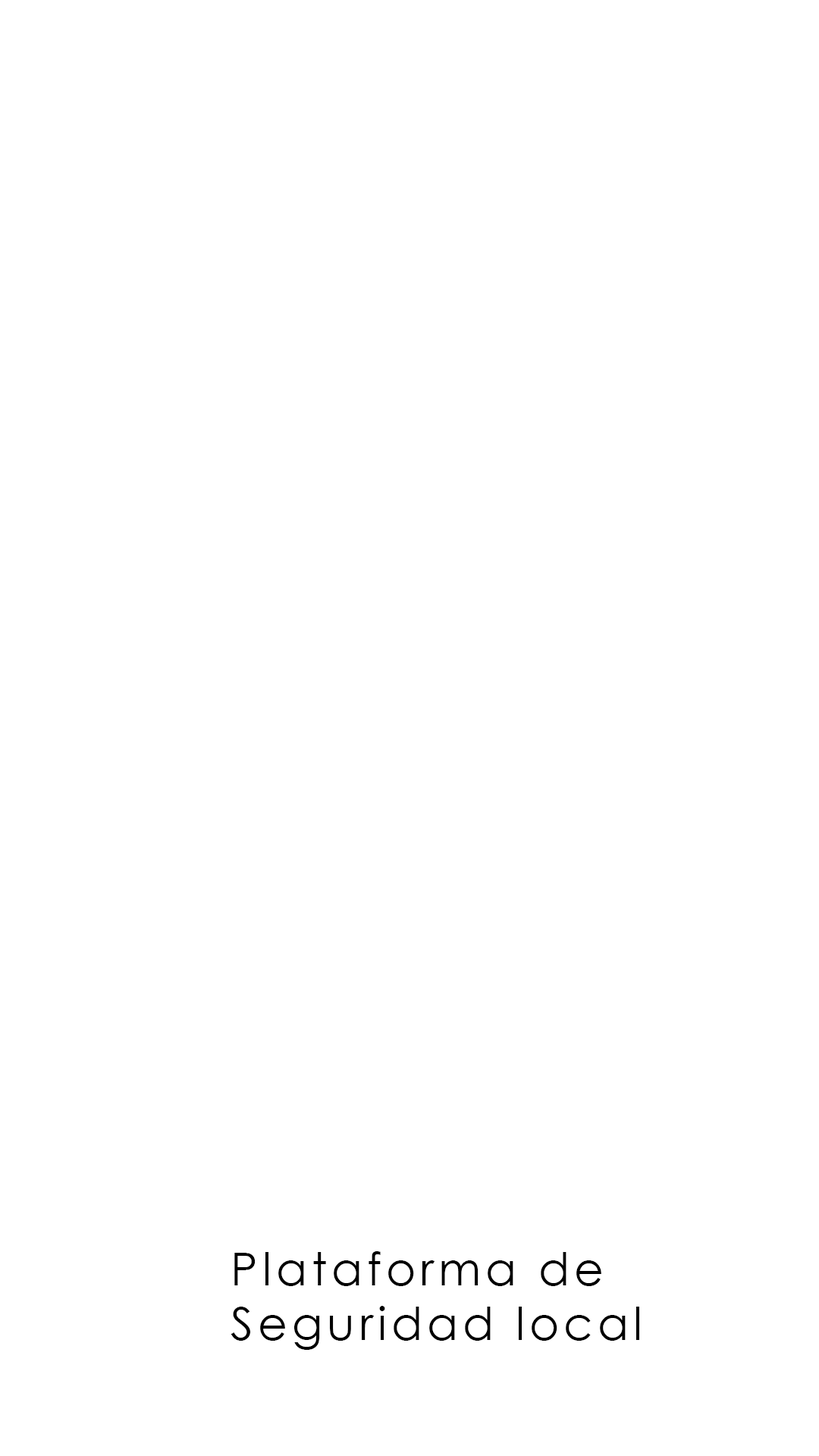
<style>
.page{position:relative;width:819px;height:1456px;background:#ffffff}
.page>*{position:absolute;margin:0}
.t1{font:45.5px "CenturyGothic";letter-spacing:0.1em;color:#000000}
</style>
<div class="page">
<p class="t1" style="left:231px;top:1251px;width:408px;height:99px">Plataforma de Seguridad local</p>
</div>
